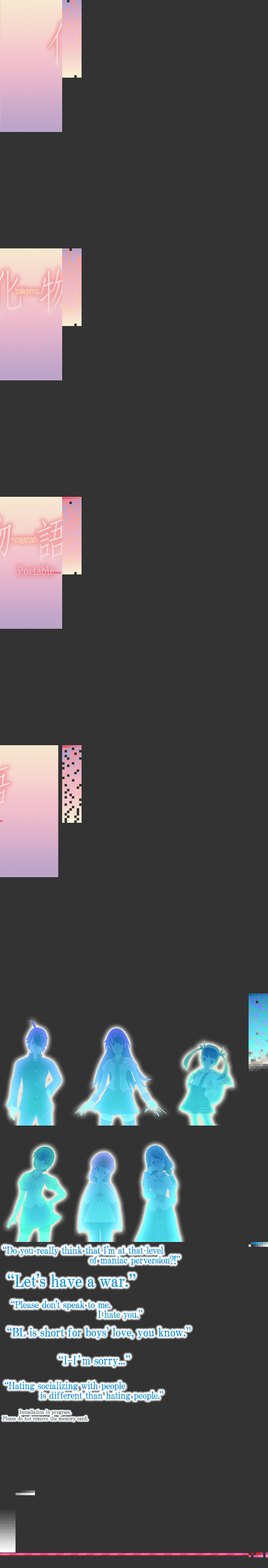
<style>
.page{position:relative;width:268px;height:1568px;background:#333333}
.page>*{position:absolute;margin:0}
.t1{font:9.7px/9.7px "HGPMinchoB";letter-spacing:-0.025em;color:#1597d4}
.t2{font:16.5px "HGPMinchoB";letter-spacing:-0.025em;color:#1599d3}
.t3{font:11.6px "HGPMinchoB";letter-spacing:-0.025em;color:#1393d5}
.t4{font:11.6px "HGPMinchoB";letter-spacing:-0.025em;color:#169ad3}
.t5{font:9.7px/9.7px "HGPMinchoB";letter-spacing:-0.025em;color:#1495d4}
</style>
<div class="page">
<p class="t1" style="left:3px;top:1246px;width:177px;height:19px">“Do you really think that I'm at that level<br>     of maniac perversion?!”</p>
<p class="t2" style="left:7px;top:1273px;width:128px;height:14px">“Let's have a war.”</p>
<p class="t3" style="left:7px;top:1327px;width:184px;height:12px">“BL is short for boys' love, you know.”</p>
<p class="t4" style="left:59px;top:1355px;width:72px;height:12px">“I-I’m sorry...”</p>
<p class="t5" style="left:5px;top:1381px;width:158px;height:20px">“Hating socializing with people<br>            is different than hating people.”</p>
</div>
